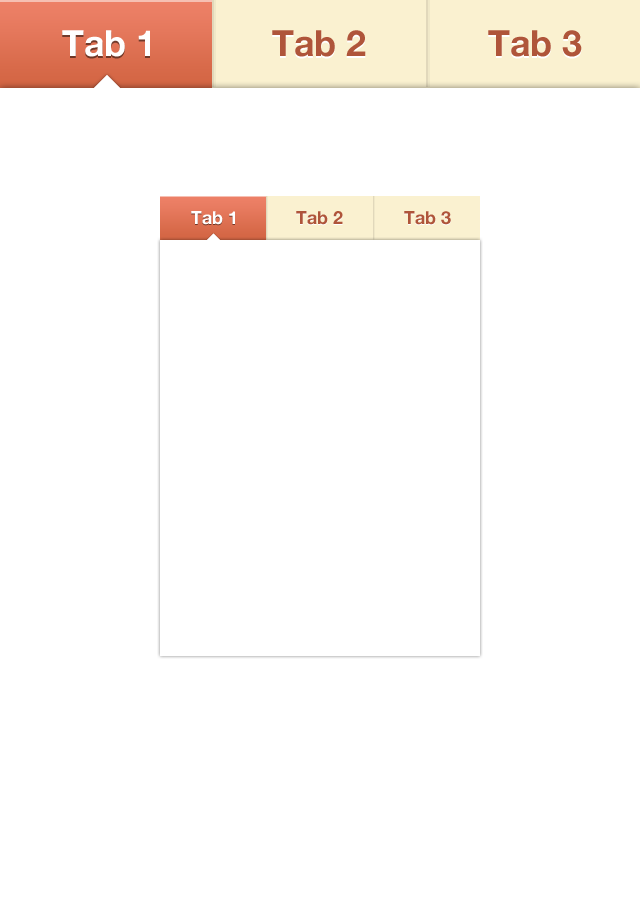
<style>
.page{position:relative;width:640px;height:920px;background:#ffffff}
.page>*{position:absolute;margin:0}
.t1{font:36px "HelveticaNeue-Bold";color:#ffffff}
.t2{font:36px "HelveticaNeue-Bold";color:#af553a}
.t3{font:18px "HelveticaNeue-Bold";color:#ffffff}
.t4{font:18px "HelveticaNeue-Bold";color:#af553a}
</style>
<div class="page">
<p class="t1" style="left:62px;top:30px;width:88px;height:27px">Tab 1</p>
<p class="t2" style="left:272px;top:30px;width:94px;height:27px">Tab 2</p>
<p class="t2" style="left:488px;top:30px;width:94px;height:27px">Tab 3</p>
<p class="t3" style="left:191px;top:211px;width:44px;height:14px">Tab 1</p>
<p class="t4" style="left:296px;top:211px;width:47px;height:14px">Tab 2</p>
<p class="t4" style="left:404px;top:211px;width:47px;height:14px">Tab 3</p>
</div>
